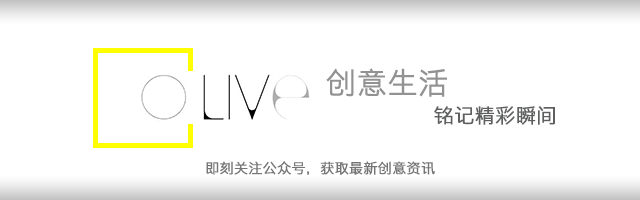
<style>
.page{position:relative;width:640px;height:200px;background:#ffffff}
.page>*{position:absolute;margin:0}
.t1{font:30px "STHeitiSC-Light";color:#939393;font-weight:bold}
.t2{font:20px "STHeitiSC-Light";color:#5e5f5f;font-weight:bold}
.t3{font:14px "STHeitiSC-Light";color:#767575;font-weight:bold}
</style>
<div class="page">
<p class="t1" style="left:326px;top:68px;width:121px;height:29px">创意生活</p>
<p class="t2" style="left:434px;top:106px;width:121px;height:19px">铭记精彩瞬间</p>
<p class="t3" style="left:206px;top:161px;width:229px;height:14px">即刻关注公众号，获取最新创意资讯</p>
</div>
